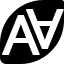
<style>
.page{position:relative;width:64px;height:64px;background:#000000}
.page>*{position:absolute;margin:0}
.t1{font:59.6px "Corbel";color:#ffffff;font-weight:bold}
</style>
<div class="page">
<p class="t1" style="left:2px;top:15px;width:38px;height:40px">A</p>
<p class="t1" style="left:26px;top:9px;width:38px;height:40px">A</p>
</div>
